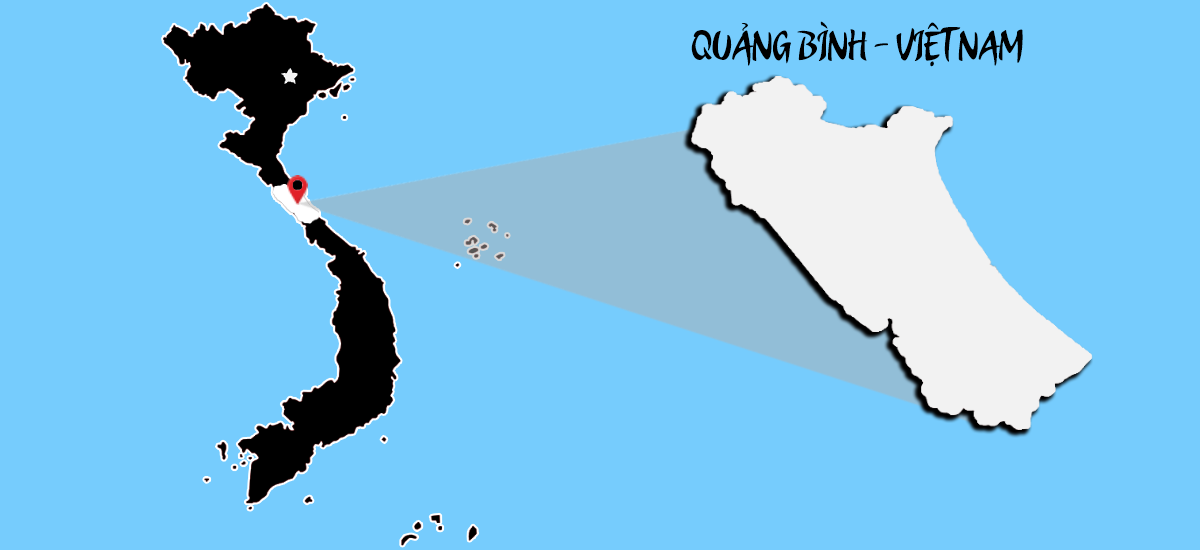
<style>
.page{position:relative;width:1200px;height:550px;background:#76ccfd}
.page>*{position:absolute;margin:0}
.t1{font:54.2px "UTM-Candombe";color:#000000;text-transform:uppercase}
</style>
<div class="page">
<p class="t1" style="left:691px;top:21px;width:332px;height:46px">quảng bình - Việt Nam</p>
</div>
